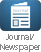
<style>
.page{position:relative;width:41px;height:52px;background:#ffffff}
.page>*{position:absolute;margin:0}
.t1{font:8.5px/10px "MyriadPro-Regular";color:#878787}
</style>
<div class="page">
<p class="t1" style="left:0px;top:34px;width:40px;height:18px;text-align:center">Journal/<br>Newspaper</p>
</div>
